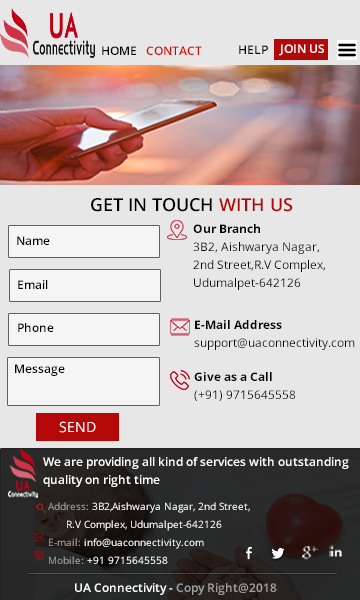
<style>
.page{position:relative;width:360px;height:600px;background:#e7e7e7}
.page>*{position:absolute;margin:0}
.t1{font:12px "OpenSans-Semibold";color:#030000}
.t2{font:12px "OpenSans-Semibold";color:#d80505}
.t3{font:12px "OpenSans-Semibold";color:#ffffff}
.t4{font:18px "OpenSans-Semibold";color:#000000}
.t5{font:18px "OpenSans-Semibold";color:#b40707}
.t6{font:12px/6px "OpenSans";color:#040404}
.t7{font:12px/6px "OpenSans-Bold";color:#040404}
.t8{font:12px "OpenSans-Semibold";color:#000000}
.t9{font:10px "OpenSans";color:#ffffff}
.t10{font:14px "OpenSans";color:#ffffff}
.t11{font:12px "OpenSans";color:#040404}
.t12{font:12px/6px "OpenSans-Semibold";color:#ffffff}
.t13{font:10px/6px "OpenSans";color:#ffffff}
.t14{font:10px/6px "OpenSans";color:#a39f9f}
.t15{font:12px "OpenSans-Semibold";color:#a09d9d}
</style>
<div class="page">
<p class="t1" style="left:102px;top:46px;width:34px;height:9px">HOME</p>
<p class="t2" style="left:146px;top:46px;width:56px;height:9px">CONTACT</p>
<p class="t1" style="left:239px;top:45px;width:29px;height:9px">HELP</p>
<p class="t3" style="left:279px;top:44px;width:45px;height:12px">JOIN US</p>
<p class="t4" style="left:91px;top:198px;width:202px;height:14px">GET IN TOUCH <span class="t5">WITH US</span></p>
<p class="t6" style="left:193px;top:224px;width:133px;height:66px"><span class="t7"> Our Branch<br><br><br></span> 3B2, Aishwarya Nagar,<br><br><br> 2nd Street,R.V Complex,<br><br><br> Udumalpet-642126</p>
<p class="t8" style="left:17px;top:236px;width:33px;height:9px"><span class="t9"><br>    <br>    </span>Name</p>
<p class="t8" style="left:18px;top:280px;width:30px;height:9px">Email</p>
<p class="t8" style="left:18px;top:323px;width:36px;height:9px">Phone</p>
<p class="t6" style="left:194px;top:320px;width:161px;height:30px"><span class="t7"> <br>E-Mail Address<br><br><br></span>support@uaconnectivity.com</p>
<p class="t8" style="left:15px;top:364px;width:50px;height:12px">Message</p>
<p class="t6" style="left:194px;top:372px;width:102px;height:29px"><span class="t7">Give as a Call<br><br><br></span>(+91) 9715645558</p>
<p class="t10" style="left:59px;top:421px;width:37px;height:12px"><span class="t11"><br> <br>    </span>SEND</p>
<p class="t12" style="left:43px;top:457px;width:306px;height:30px">We are providing all kind of services with outstanding <br><br><br>quality on right time</p>
<p class="t13" style="left:48px;top:502px;width:202px;height:62px"><span class="t14">Address:</span> 3B2,Aishwarya Nagar, 2nd Street,<br><br><br>      R.V Complex, Udumalpet-642126<br><br><br><span class="t14">E-mail: </span>info@uaconnectivity.com<br><br><br><span class="t14">Mobile:</span> +91 9715645558</p>
<p class="t3" style="left:75px;top:583px;width:202px;height:12px">UA Connectivity - <span class="t15">Copy Right@2018</span></p>
</div>
